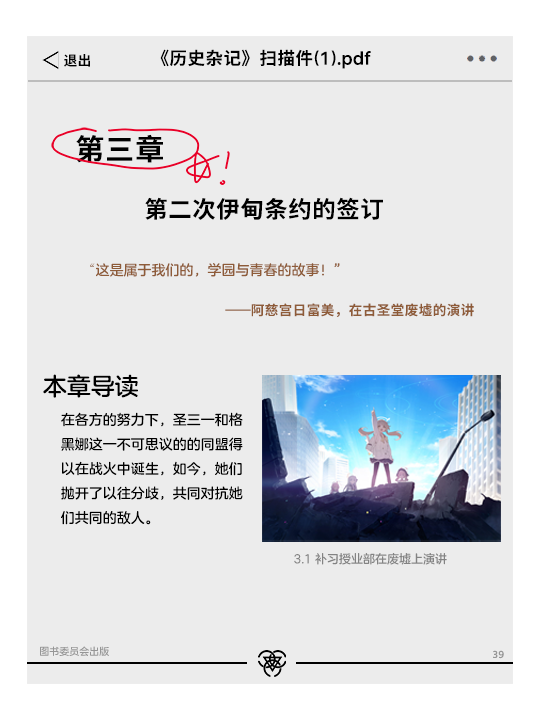
<style>
.page{position:relative;width:540px;height:720px;background:#ececec}
.page>*{position:absolute;margin:0}
.t1{font:14px "LXGW975GothicSC-600W";color:#000000}
.t2{font:18px "LXGW975GothicSC-600W";color:#000000}
.t3{font:30px "LXGW975GothicSC-600W";color:#000000}
.t4{font:24px "LXGW975GothicSC-600W";color:#000000}
.t5{font:14px "FZLANTY_ZHONGJW--GB1-0";color:#8e5b38}
.t6{font:14px "STFangsong";color:#8e5b38}
.t7{font:14px "LXGW975GothicSC-600W";color:#8e5b38}
.t8{font:24px "FZLANTY_ZHONGJW--GB1-0";color:#000000}
.t9{font:14px "FZLANTY_ZHONGJW--GB1-0";color:#000000}
.t10{font:12px "FZLANTY_ZHONGJW--GB1-0";color:#838383}
.t11{font:10px "FZLANTY_ZHONGJW--GB1-0";color:#969696}
.t12{font:10px "LXGW975GothicSC-600W";color:#969696}
</style>
<div class="page">
<p class="t1" style="left:64px;top:54px;width:26px;height:13px">退出</p>
<p class="t2" style="left:160px;top:49px;width:211px;height:20px">《历史杂记》扫描件(1).pdf</p>
<p class="t3" style="left:76px;top:134px;width:87px;height:29px">第三章</p>
<p class="t4" style="left:145px;top:197px;width:238px;height:23px">第二次伊甸条约的签订</p>
<p class="t5" style="left:90px;top:263px;width:250px;height:14px"><span class="t6">“</span>这是属于我们的，学园与青春的故事！”</p>
<p class="t7" style="left:225px;top:303px;width:249px;height:14px">——阿慈宫日富美，在古圣堂废墟的演讲</p>
<p class="t8" style="left:43px;top:374px;width:95px;height:24px">本章导读</p>
<p class="t9" style="left:61px;top:412px;width:182px;height:113px">在各方的努力下，圣三一和格<br>黑娜这一不可思议的的同盟得<br>以在战火中诞生，如今，她们<br>抛开了以往分歧，共同对抗她<br>们共同的敌人。</p>
<p class="t10" style="left:294px;top:553px;width:153px;height:12px">3.1 补习授业部在废墟上演讲</p>
<p class="t11" style="left:40px;top:646px;width:69px;height:10px">图书委员会出版</p>
<p class="t12" style="left:493px;top:650px;width:11px;height:9px">39</p>
</div>
